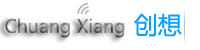
<style>
.page{position:relative;width:200px;height:50px;background:#ffffff}
.page>*{position:absolute;margin:0}
.t1{font:24px "MicrosoftYaHei";color:#0aa1fa}
.t2{font:18px "MicrosoftYaHei"}
</style>
<div class="page">
<p class="t1" style="left:134px;top:13px;width:48px;height:24px">创想</p>
<p class="t2" style="left:5px;top:18px;width:120px;height:20px">Chuang Xiang</p>
</div>
